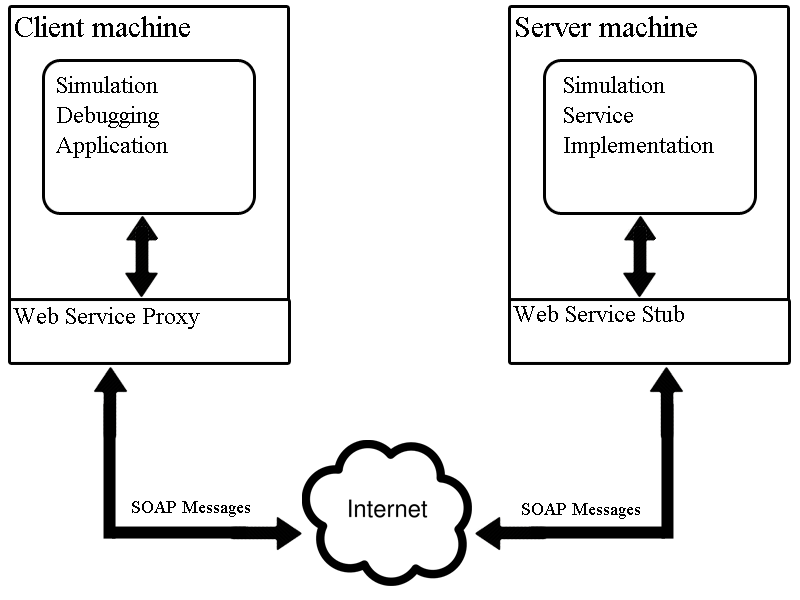
<style>
.page{position:relative;width:800px;height:600px;background:#ffffff}
.page>*{position:absolute;margin:0}
.t1{font:30px "TimesNewRomanPSMT";color:#000000}
.t2{font:24px/30px "TimesNewRomanPSMT";color:#000000}
.t3{font:24px "TimesNewRomanPSMT";color:#000000}
.t4{font:18px "TimesNewRomanPSMT";color:#000000}
</style>
<div class="page">
<p class="t1" style="left:15px;top:16px;width:175px;height:21px">Client machine</p>
<p class="t1" style="left:516px;top:16px;width:181px;height:21px">Server machine</p>
<p class="t2" style="left:56px;top:76px;width:112px;height:82px">Simulation<br>Debugging<br>Application</p>
<p class="t2" style="left:564px;top:76px;width:150px;height:82px">Simulation<br>Service<br>Implementation</p>
<p class="t3" style="left:513px;top:305px;width:171px;height:17px">Web Service Stub</p>
<p class="t3" style="left:13px;top:307px;width:187px;height:22px">Web Service Proxy</p>
<p class="t4" style="left:132px;top:501px;width:118px;height:16px">SOAP Messages</p>
<p class="t4" style="left:522px;top:503px;width:118px;height:16px">SOAP Messages</p>
</div>
